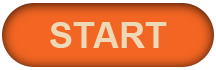
<style>
.page{position:relative;width:216px;height:70px;background:#f26522}
.page>*{position:absolute;margin:0}
.t1{font:36px "Arial-BoldMT";color:#eed8b6}
</style>
<div class="page">
<p class="t1" style="left:50px;top:22px;width:117px;height:26px">START</p>
</div>
